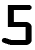
<style>
.page{position:relative;width:35px;height:50px;background:#ffffff}
.page>*{position:absolute;margin:0}
.t1{font:61.9px "OCRAExtended";color:#000000;scale:1.16 1}
</style>
<div class="page">
<p class="t1" style="left:1px;top:5px;width:31px;height:40px">5</p>
</div>
